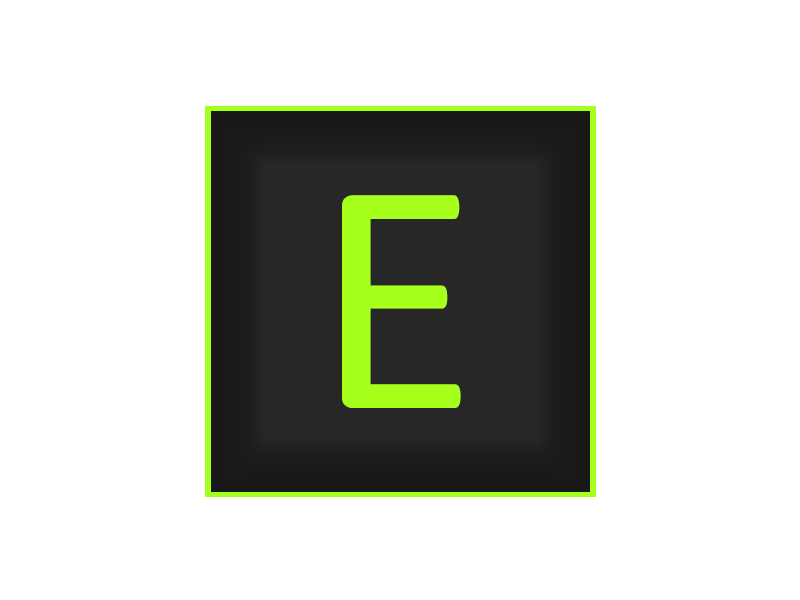
<style>
.page{position:relative;width:800px;height:600px;background:#ffffff}
.page>*{position:absolute;margin:0}
.t1{font:336.3px "Calibri";color:#a7ff1c}
</style>
<div class="page">
<p class="t1" style="left:342px;top:195px;width:119px;height:213px">E</p>
</div>
